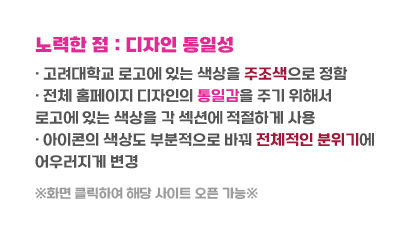
<style>
.page{position:relative;width:406px;height:230px;background:#ffffff}
.page>*{position:absolute;margin:0}
.t1{font:18px "SBAggroB";color:#e22996}
.t2{font:15px/22px "SBAggroM";color:#555555}
.t3{font:15px/22px "SBAggroM";color:#a11839}
.t4{font:15px/22px "SBAggroM";color:#e22996}
.t5{font:13px "SBAggroM";color:#9b9b9b}
</style>
<div class="page">
<p class="t1" style="left:35px;top:36px;width:199px;height:17px">노력한 점 : 디자인 통일성</p>
<p class="t2" style="left:35px;top:66px;width:339px;height:103px">· 고려대학교 로고에 있는 색상을 <span class="t3">주조색</span>으로 정함                            <br>· 전체 홈페이지 디자인의 <span class="t4">통일감</span>을 주기 위해서 <br>로고에 있는 색상을 각 섹션에 적절하게 사용<br>· 아이콘의 색상도 부분적으로 바꿔 <span class="t3">전체적인 분위기</span>에 <br>어우러지게 변경</p>
<p class="t5" style="left:35px;top:187px;width:223px;height:13px">※화면 클릭하여 해당 사이트 오픈 가능※</p>
</div>
